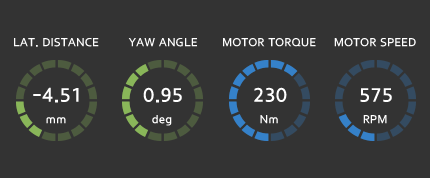
<style>
.page{position:relative;width:430px;height:178px;background:#333333}
.page>*{position:absolute;margin:0}
.t1{font:12px "HDharmonyM";color:#ffffff}
.t2{font:20px "HDharmonyM";color:#ffffff}
</style>
<div class="page">
<p class="t1" style="left:14px;top:38px;width:85px;height:9px">LAT. DISTANCE</p>
<p class="t1" style="left:128px;top:38px;width:69px;height:9px">YAW ANGLE</p>
<p class="t1" style="left:223px;top:38px;width:93px;height:9px">MOTOR TORQUE</p>
<p class="t1" style="left:334px;top:38px;width:82px;height:9px">MOTOR SPEED</p>
<p class="t2" style="left:33px;top:87px;width:46px;height:16px">-4.51</p>
<p class="t2" style="left:143px;top:87px;width:39px;height:16px">0.95</p>
<p class="t2" style="left:254px;top:87px;width:33px;height:15px">230</p>
<p class="t2" style="left:360px;top:88px;width:32px;height:14px">575</p>
<p class="t1" style="left:46px;top:117px;width:20px;height:7px">mm</p>
<p class="t1" style="left:152px;top:115px;width:20px;height:11px">deg</p>
<p class="t1" style="left:260px;top:115px;width:18px;height:9px">Nm</p>
<p class="t1" style="left:363px;top:115px;width:24px;height:9px">RPM</p>
</div>
